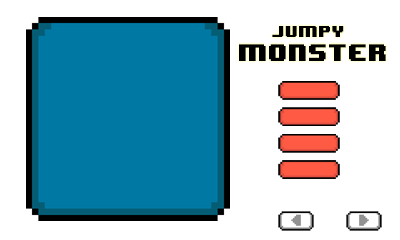
<style>
.page{position:relative;width:400px;height:240px;background:#ffffff}
.page>*{position:absolute;margin:0}
.t1{font:20px "8BITWONDERNominal";color:#000000}
.t2{font:13.3px "8BITWONDERNominal";color:#000000}
</style>
<div class="page">
<p class="t1" style="left:239px;top:26px;width:147px;height:35px;text-align:center"><span class="t2">jumpy</span> <br>monster</p>
</div>
